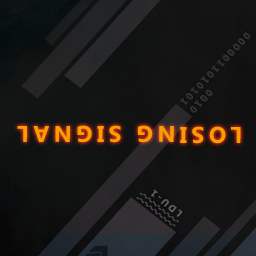
<style>
.page{position:relative;width:256px;height:256px}
.page>*{position:absolute;margin:0}
.t1{font:22.7px "KhmerUI-Bold";letter-spacing:0.2em;color:#f4a002;text-transform:uppercase}
</style>
<div class="page">
<p class="t1" style="left:17px;top:125px;width:224px;height:19px;rotate:-180deg">LOSING SIGNAL</p>
</div>
